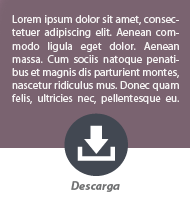
<style>
.page{position:relative;width:190px;height:200px;background:#7a6370}
.page>*{position:absolute;margin:0}
.t1{font:11px "MyriadPro-Regular";color:#f3f1f1}
.t2{font:12px "MyriadPro-BoldIt";color:#707172}
</style>
<div class="page">
<p class="t1" style="left:12px;top:15px;width:167px;height:89px;text-align:justify">Lorem ipsum dolor sit amet, consectetuer adipiscing elit. Aenean commodo ligula eget dolor. Aenean massa. Cum sociis natoque penatibus et magnis dis parturient montes, nascetur ridiculus mus. Donec quam felis, ultricies nec, pellentesque eu. pretium quis, sem.</p>
<p class="t2" style="left:71px;top:181px;width:49px;height:11px">Descarga</p>
</div>
